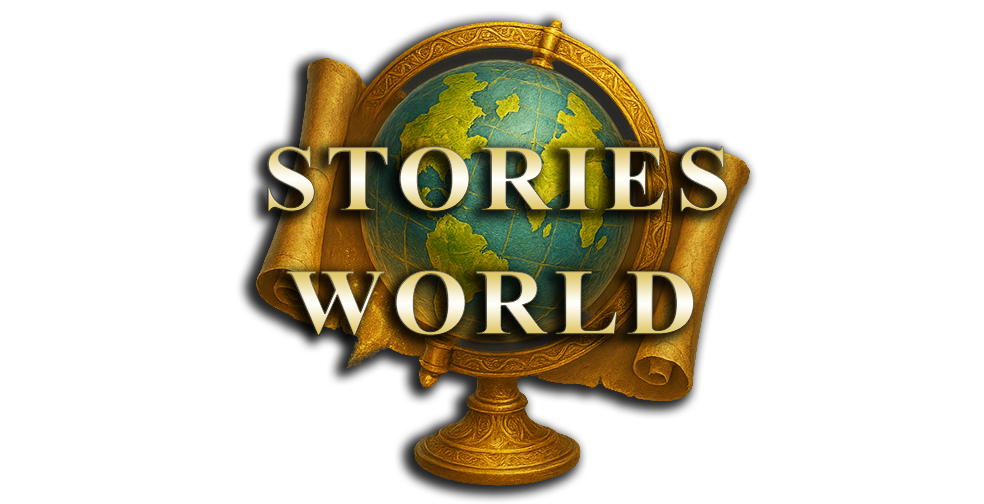
<style>
.page{position:relative;width:984px;height:504px;background:#ffffff}
.page>*{position:absolute;margin:0}
.t1{font:94px "TimesNewRomanPS-BoldMT";letter-spacing:0.07em;scale:1.05 1}
</style>
<div class="page">
<p class="t1" style="left:267px;top:146px;width:461px;height:66px">STORIES</p>
<p class="t1" style="left:287px;top:271px;width:407px;height:65px">WORLD</p>
</div>
